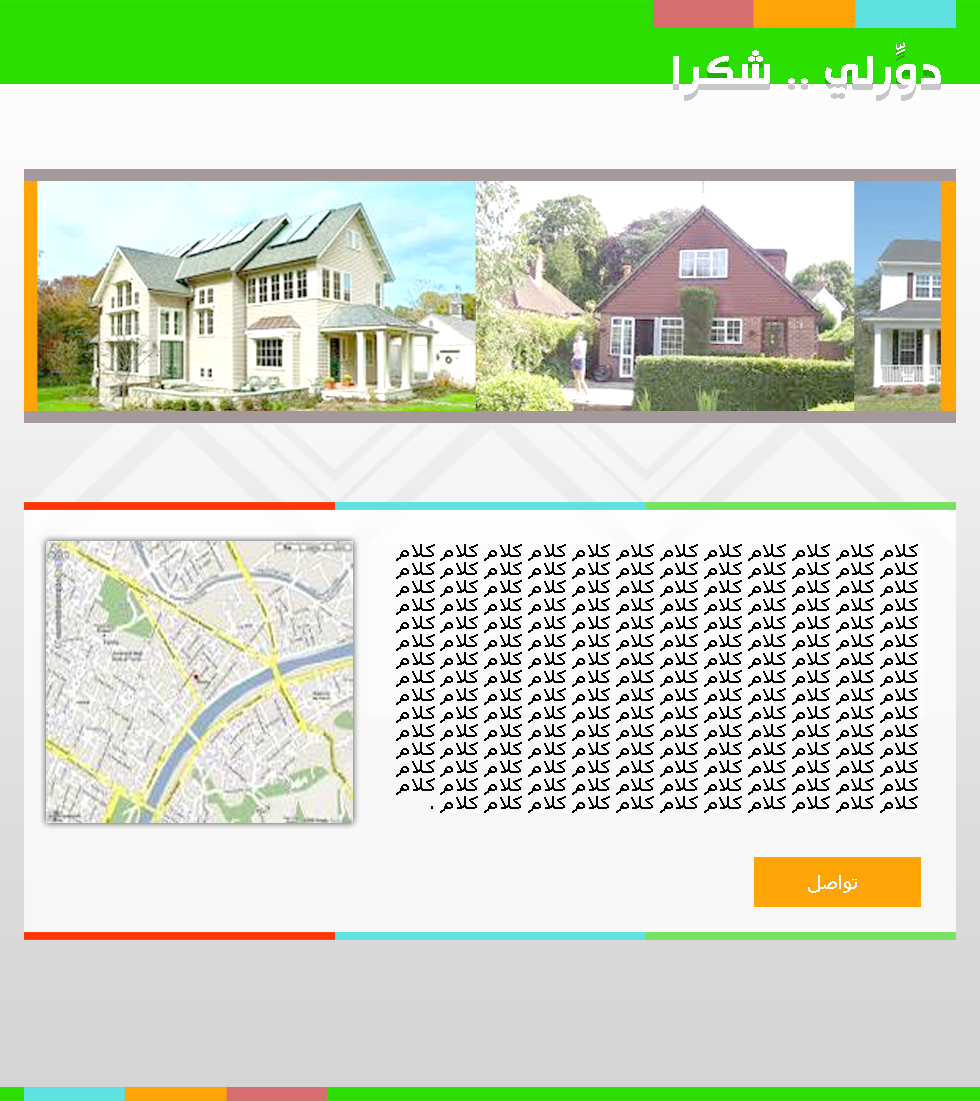
<style>
.page{position:relative;width:980px;height:1101px}
.page>*{position:absolute;margin:0}
.t1{font:46.9px "HacenTunisiaBold";letter-spacing:0.019em;color:#ffffff;scale:1.1 1}
.t2{font:18.4px/18px "Tahoma";letter-spacing:0.02em;color:#000000;scale:1.1 1}
.t3{font:18.8px "Tahoma";letter-spacing:0.02em;color:#ffffff;scale:1.1 1}
</style>
<div class="page">
<p class="t1" style="left:673px;top:42px;width:268px;height:53px">دوِّرلي .. شكرا</p>
<p class="t2" style="left:396px;top:544px;width:522px;height:269px">كلام كلام كلام كلام كلام كلام كلام كلام كلام كلام كلام كلام<br>كلام كلام كلام كلام كلام كلام كلام كلام كلام كلام كلام كلام<br>كلام كلام كلام كلام كلام كلام كلام كلام كلام كلام كلام كلام<br>كلام كلام كلام كلام كلام كلام كلام كلام كلام كلام كلام كلام<br>كلام كلام كلام كلام كلام كلام كلام كلام كلام كلام كلام كلام<br>كلام كلام كلام كلام كلام كلام كلام كلام كلام كلام كلام كلام<br>كلام كلام كلام كلام كلام كلام كلام كلام كلام كلام كلام كلام<br>كلام كلام كلام كلام كلام كلام كلام كلام كلام كلام كلام كلام<br>كلام كلام كلام كلام كلام كلام كلام كلام كلام كلام كلام كلام<br>كلام كلام كلام كلام كلام كلام كلام كلام كلام كلام كلام كلام<br>كلام كلام كلام كلام كلام كلام كلام كلام كلام كلام كلام كلام<br>كلام كلام كلام كلام كلام كلام كلام كلام كلام كلام كلام كلام<br>كلام كلام كلام كلام كلام كلام كلام كلام كلام كلام كلام كلام<br>كلام كلام كلام كلام كلام كلام كلام كلام كلام كلام كلام كلام<br>كلام كلام كلام كلام كلام كلام كلام كلام كلام كلام كلام .</p>
<p class="t3" style="left:808px;top:875px;width:49px;height:18px">تواصل</p>
</div>
